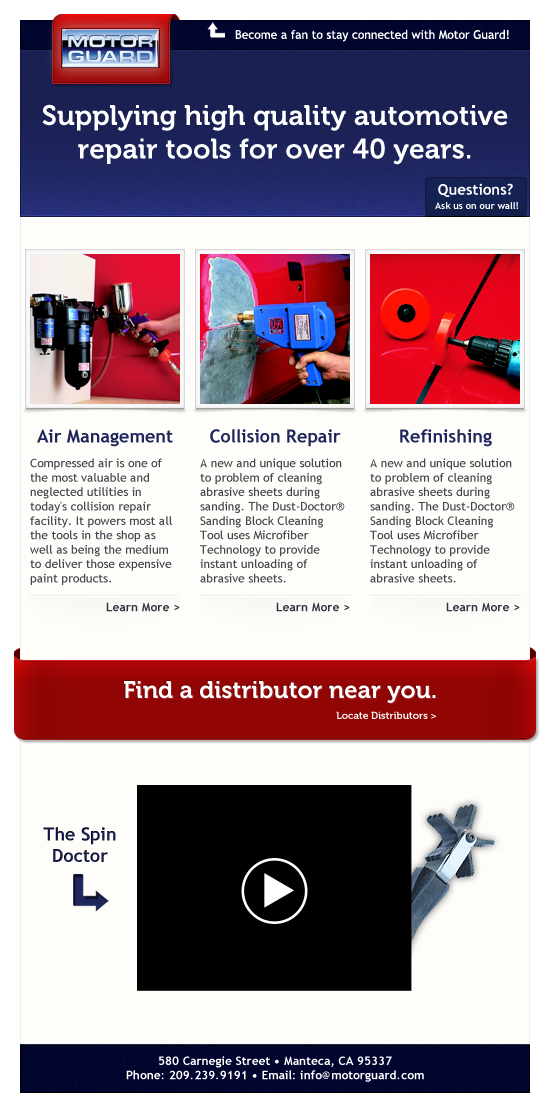
<style>
.page{position:relative;width:550px;height:1093px;background:#fefdfa}
.page>*{position:absolute;margin:0}
.t1{font:12px "TrebuchetMS";color:#ffffff}
.t2{font:28px "Museo-700";color:#ffffff}
.t3{font:18px "TrebuchetMS-Bold";color:#1f265b}
.t4{font:12px "TrebuchetMS";color:#45464e}
.t5{font:12px "TrebuchetMS-Bold";color:#333541}
.t6{font:12px "TrebuchetMS";color:#45464d}
.t7{font:24px "Museo-700";color:#ffffff}
.t8{font:10px "Museo-700";color:#ffffff}
.t9{font:18px "TrebuchetMS-Bold"}
.t10{font:12px "TrebuchetMS-Bold";color:#ffffff}
</style>
<div class="page">
<p class="t1" style="left:235px;top:29px;width:274px;height:13px">Become a fan to stay connected with Motor Guard!</p>
<p class="t2" style="left:42px;top:104px;width:466px;height:61px;text-align:center">Supplying high quality automotive repair tools for over 40 years.</p>
<p class="t3" style="left:37px;top:429px;width:136px;height:18px">Air Management</p>
<p class="t3" style="left:210px;top:429px;width:131px;height:18px">Collision Repair</p>
<p class="t3" style="left:400px;top:429px;width:92px;height:18px">Refinishing</p>
<p class="t4" style="left:30px;top:458px;width:150px;height:154px">Compressed air is one of the most valuable and neglected utilities in today's collision repair facility. It powers most all the tools in the shop as well as being the medium to deliver those expensive paint products.<br><br><span class="t5">Learn More &gt;</span></p>
<p class="t6" style="left:200px;top:458px;width:150px;height:154px">A new and unique solution to problem of cleaning abrasive sheets during sanding. The Dust-Doctor® Sanding Block Cleaning Tool uses Microfiber Technology to provide instant unloading of abrasive sheets.<br><br><span class="t5">Learn More &gt;</span></p>
<p class="t6" style="left:370px;top:458px;width:150px;height:154px">A new and unique solution to problem of cleaning abrasive sheets during sanding. The Dust-Doctor® Sanding Block Cleaning Tool uses Microfiber Technology to provide instant unloading of abrasive sheets.<br><br><span class="t5">Learn More &gt;</span></p>
<p class="t7" style="left:124px;top:681px;width:312px;height:22px">Find a distributor near you.</p>
<p class="t8" style="left:336px;top:711px;width:100px;height:8px">Locate Distributors &gt;</p>
<p class="t9" style="left:43px;top:827px;width:73px;height:35px;text-align:center">The Spin Doctor</p>
<p class="t10" style="left:126px;top:1056px;width:298px;height:26px;text-align:center">580 Carnegie Street • Manteca, CA 95337<br>Phone: 209.239.9191 • Email: info@motorguard.com</p>
</div>
